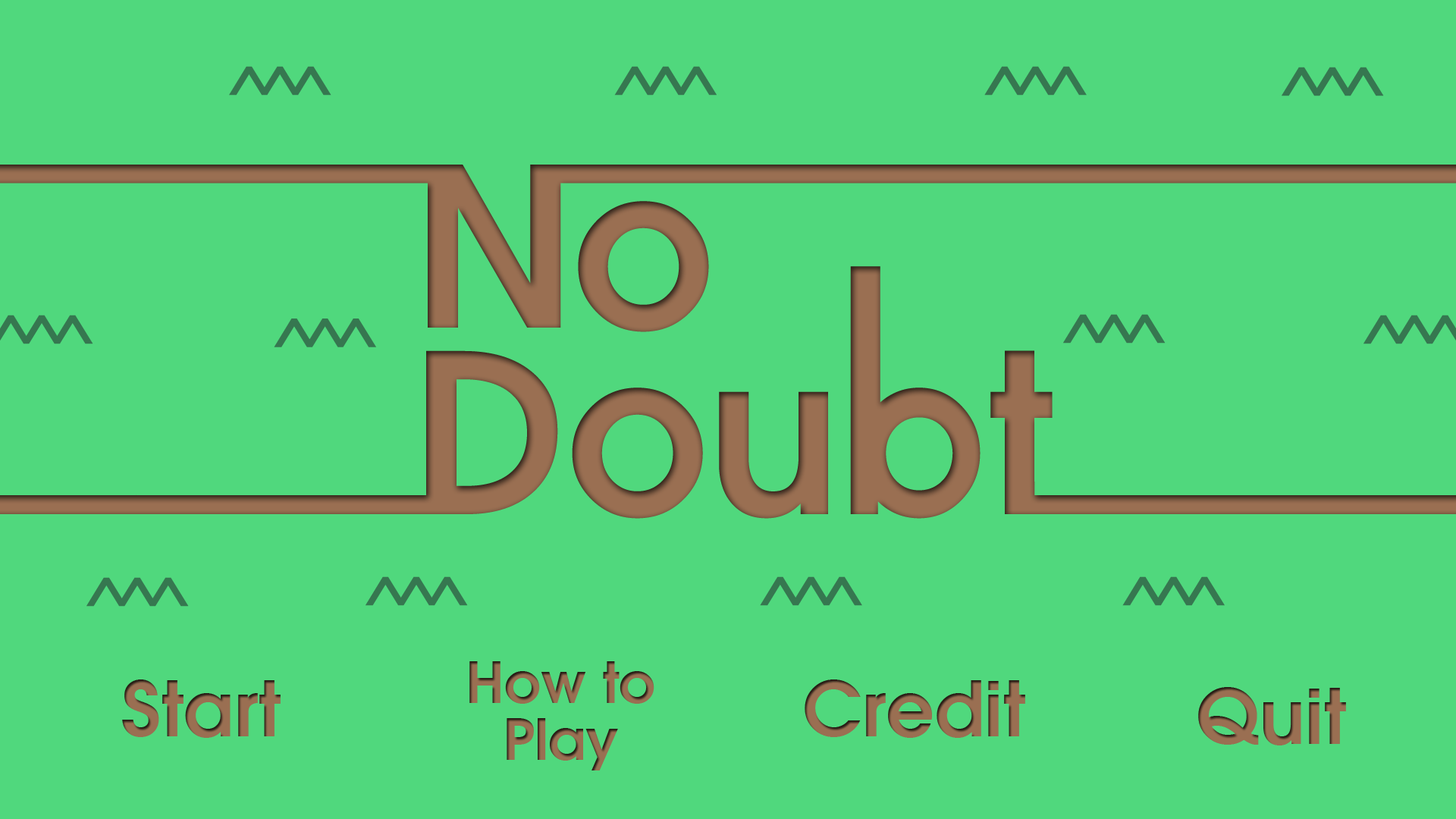
<style>
.page{position:relative;width:1456px;height:819px;background:#50d87d}
.page>*{position:absolute;margin:0}
.t1{font:56.9px/56.9px "AvantGarde-Demi";color:#9a6f52}
.t2{font:75.8px "AvantGarde-Demi";color:#9a6f52}
</style>
<div class="page">
<p class="t1" style="left:469px;top:661px;width:185px;height:109px;text-align:center">How to<br>Play</p>
<p class="t2" style="left:122px;top:679px;width:159px;height:59px">Start</p>
<p class="t2" style="left:805px;top:679px;width:220px;height:59px">Credit</p>
<p class="t2" style="left:1198px;top:687px;width:148px;height:58px">Quit</p>
</div>
